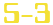
<style>
.page{position:relative;width:53px;height:25px;background:#ffffff}
.page>*{position:absolute;margin:0}
.t1{font:30px "DataSeventyPlain";color:#f3e037}
</style>
<div class="page">
<p class="t1" style="left:4px;top:3px;width:46px;height:20px">5-3</p>
</div>
